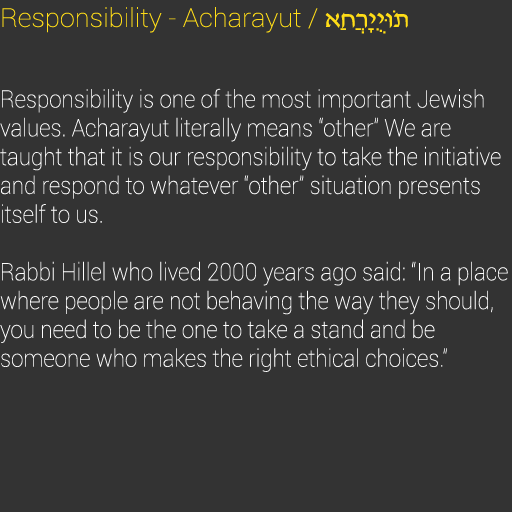
<style>
.page{position:relative;width:512px;height:512px;background:#333333}
.page>*{position:absolute;margin:0}
.t1{font:26px "Roboto-Thin";color:#ffdd17;scale:1.04 1}
.t2{font:26px "David";color:#ffdd17;scale:1.04 1}
.t3{font:24px "Roboto-Thin";color:#ffffff;scale:0.93 1}
</style>
<div class="page">
<p class="t1" style="left:2px;top:7px;width:406px;height:27px">Responsibility - Acharayut / <span class="t2">אַחֲרָיֻיּוֹת</span></p>
<p class="t3" style="left:0px;top:88px;width:508px;height:284px">Responsibility is one of the most important Jewish values. Acharayut literally means “other” We are taught that it is our responsibility to take the initiative and respond to whatever “other” situation presents itself to us. <br><br>Rabbi Hillel who lived 2000 years ago said: “In a place where people are not behaving the way they should, you need to be the one to take a stand and be <br>someone who makes the right ethical choices.”</p>
</div>
